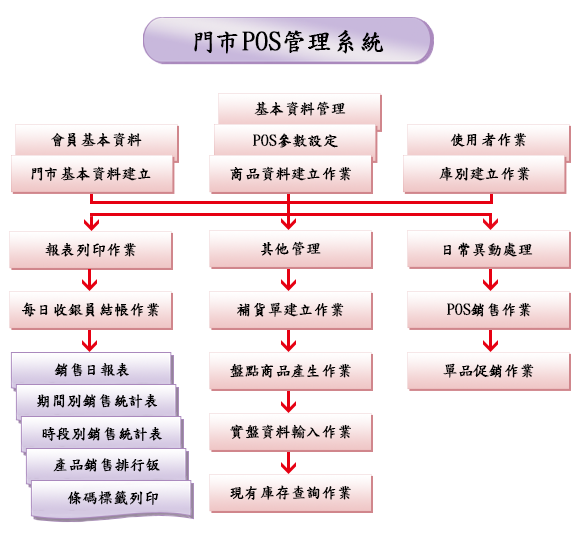
<style>
.page{position:relative;width:577px;height:545px;background:#ffffff}
.page>*{position:absolute;margin:0}
.t1{font:25px "DFKaiShu-SB-Estd-BF";color:#000000;font-weight:bold}
.t2{font:15px "DFKaiShu-SB-Estd-BF";color:#000000;font-weight:bold}
</style>
<div class="page">
<p class="t1" style="left:194px;top:30px;width:190px;height:24px">門市POS管理系統</p>
<p class="t2" style="left:254px;top:101px;width:92px;height:15px">基本資料管理</p>
<p class="t2" style="left:51px;top:132px;width:91px;height:15px">會員基本資料</p>
<p class="t2" style="left:253px;top:133px;width:85px;height:15px">POS參數設定</p>
<p class="t2" style="left:450px;top:132px;width:76px;height:15px">使用者作業</p>
<p class="t2" style="left:31px;top:166px;width:120px;height:15px">門市基本資料建立</p>
<p class="t2" style="left:230px;top:166px;width:121px;height:15px">商品資料建立作業</p>
<p class="t2" style="left:439px;top:166px;width:91px;height:15px">庫別建立作業</p>
<p class="t2" style="left:45px;top:242px;width:91px;height:15px">報表列印作業</p>
<p class="t2" style="left:261px;top:241px;width:60px;height:15px">其他管理</p>
<p class="t2" style="left:443px;top:242px;width:90px;height:15px">日常異動處理</p>
<p class="t2" style="left:21px;top:302px;width:138px;height:15px">每日收銀員結帳作業</p>
<p class="t2" style="left:237px;top:302px;width:107px;height:15px">補貨單建立作業</p>
<p class="t2" style="left:447px;top:302px;width:84px;height:15px">POS銷售作業</p>
<p class="t2" style="left:54px;top:363px;width:75px;height:14px">銷售日報表</p>
<p class="t2" style="left:230px;top:363px;width:121px;height:15px">盤點商品產生作業</p>
<p class="t2" style="left:443px;top:363px;width:91px;height:15px">單品促銷作業</p>
<p class="t2" style="left:37px;top:394px;width:121px;height:14px">期間別銷售統計表</p>
<p class="t2" style="left:230px;top:424px;width:121px;height:15px">實盤資料輸入作業</p>
<p class="t2" style="left:42px;top:427px;width:120px;height:14px">時段別銷售統計表</p>
<p class="t2" style="left:53px;top:458px;width:107px;height:14px">產品銷售排行钣</p>
<p class="t2" style="left:230px;top:485px;width:121px;height:15px">現有庫存查詢作業</p>
<p class="t2" style="left:67px;top:490px;width:92px;height:15px">條碼標籤列印</p>
</div>
